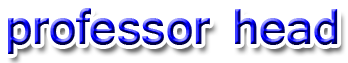
<style>
.page{position:relative;width:348px;height:63px;background:#ffffff}
.page>*{position:absolute;margin:0}
.t1{font:72px "Gautami"}
</style>
<div class="page">
<p class="t1" style="left:8px;top:8px;width:330px;height:46px">professor head</p>
</div>
